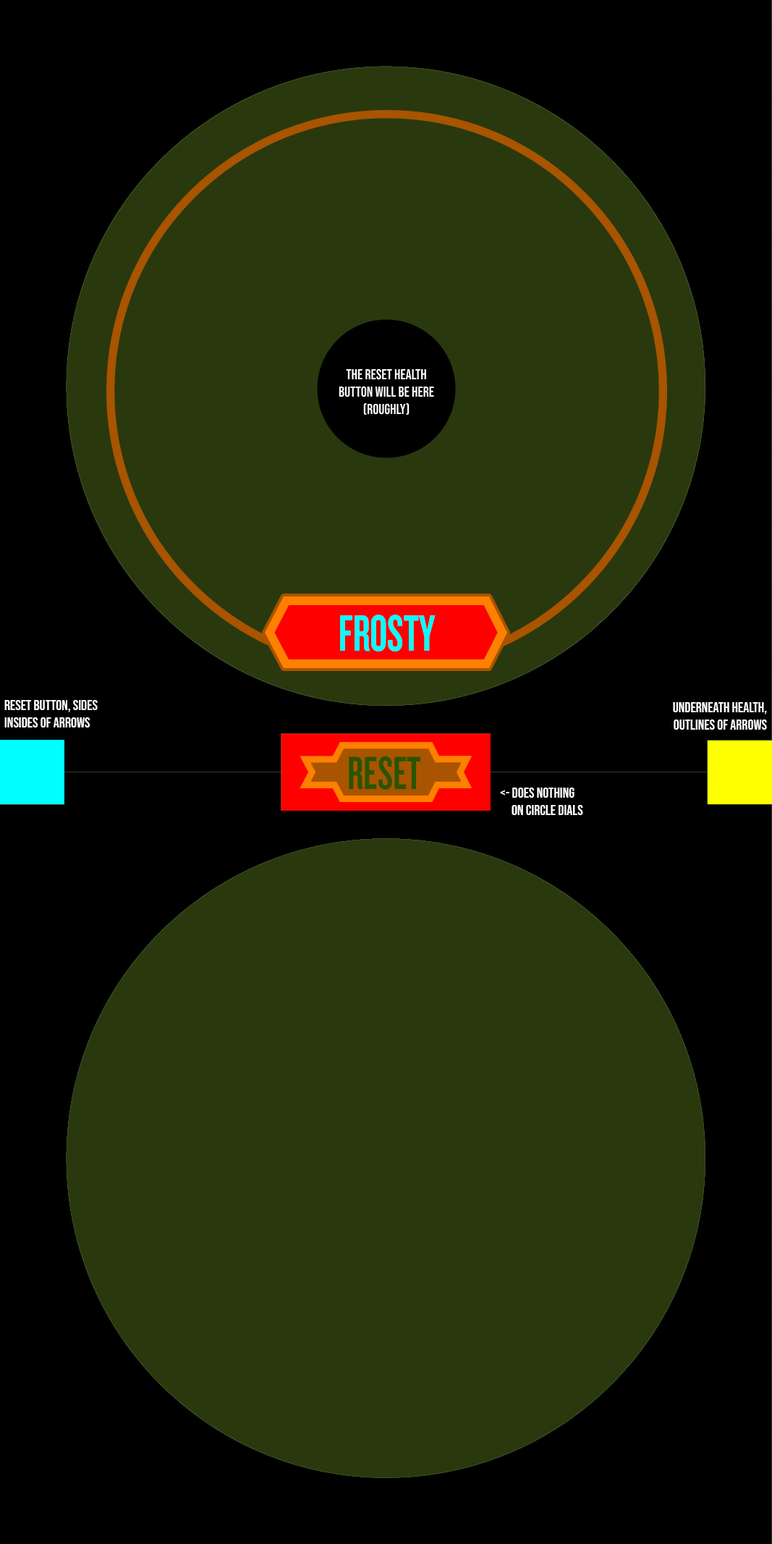
<style>
.page{position:relative;width:772px;height:1544px;background:#2a380e}
.page>*{position:absolute;margin:0}
.t1{font:53.1px "Knockout-HTF48-Featherweight-CUSTOM";color:#00ffff;scale:0.87 1}
.t2{font:14.5px "BebasNeue-Regular";color:#ffffff}
.t3{font:48.3px "Knockout-HTF48-Featherweight-CUSTOM";color:#2a5400;scale:0.9 1}
</style>
<div class="page">
<p class="t1" style="left:340px;top:615px;width:96px;height:36px">FROSTY</p>
<p class="t2" style="left:4px;top:700px;width:94px;height:27px">reset button, sides<br>insides of arrows</p>
<p class="t2" style="left:673px;top:702px;width:94px;height:28px;text-align:right">underneath health,<br>Outlines of arrows</p>
<p class="t3" style="left:349px;top:756px;width:72px;height:34px">RESET</p>
<p class="t2" style="left:500px;top:788px;width:83px;height:27px">&lt;- does nothing<br>     on circle dials</p>
</div>
